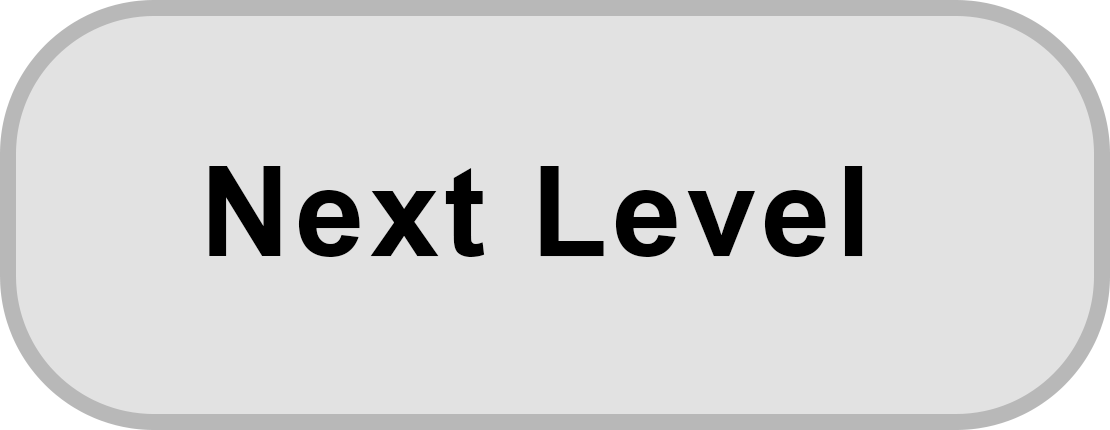
<style>
.page{position:relative;width:1110px;height:430px;background:#e2e2e2}
.page>*{position:absolute;margin:0}
.t1{font:125px "Arial-BoldMT";letter-spacing:0.04em;color:#000000}
</style>
<div class="page">
<p class="t1" style="left:209px;top:166px;width:654px;height:91px">Next Level</p>
</div>
